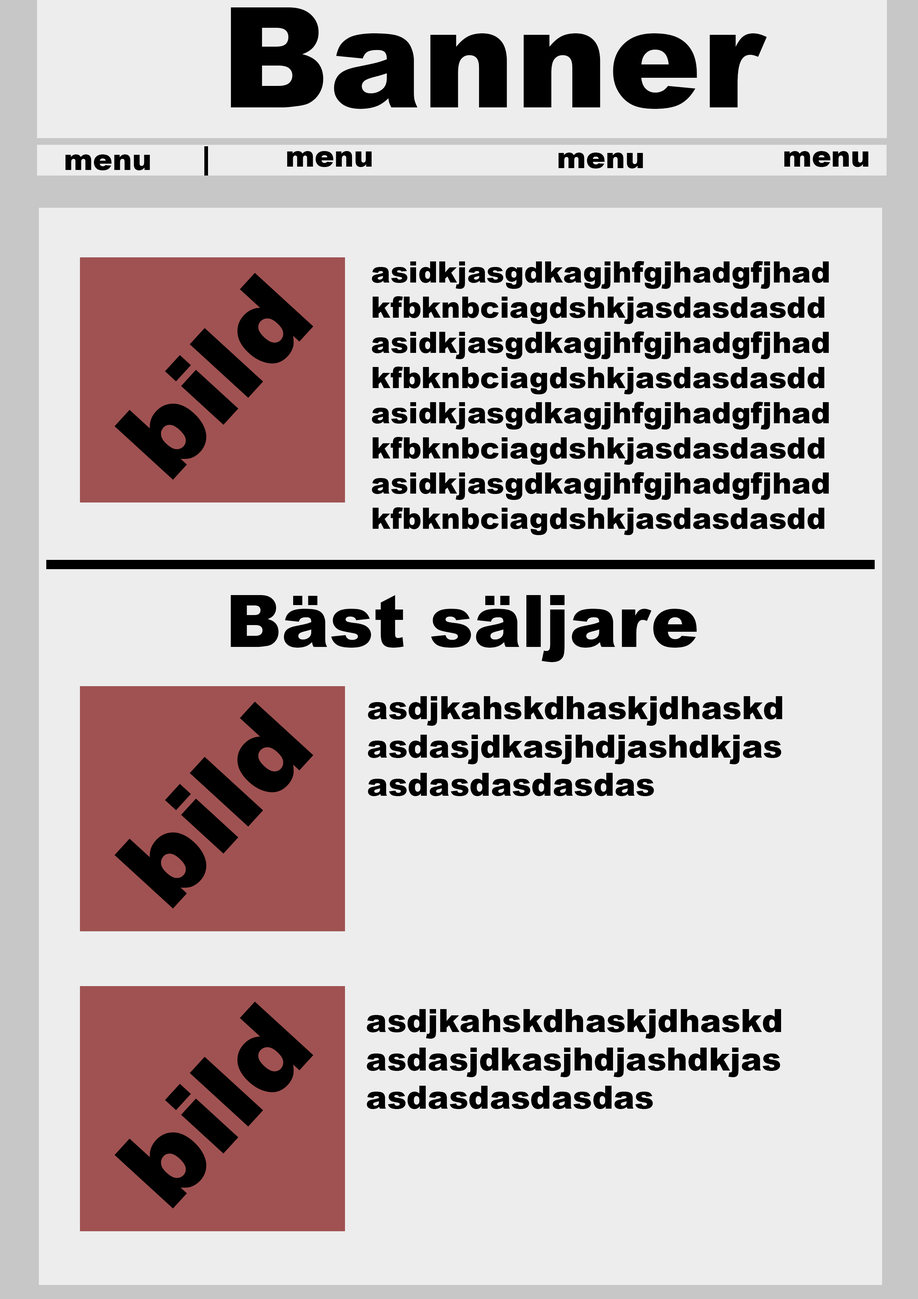
<style>
.page{position:relative;width:918px;height:1299px;background:#ededed}
.page>*{position:absolute;margin:0}
.t1{font:139.5px "Arial-Black";color:#000000}
.t2{font:29.3px "Arial-Black";color:#000000}
.t3{font:110.7px "Arial-Black";color:#000000}
.t4{font:72.1px "Arial-Black";color:#000000}
.t5{font:31.8px "Arial-Black";color:#000000}
</style>
<div class="page">
<p class="t1" style="left:231px;top:7px;width:536px;height:102px">Banner</p>
<p class="t2" style="left:65px;top:154px;width:85px;height:16px">menu</p>
<p class="t2" style="left:558px;top:153px;width:85px;height:15px">menu</p>
<p class="t2" style="left:784px;top:151px;width:85px;height:16px">menu</p>
<p class="t3" style="left:114px;top:272px;width:200px;height:208px;rotate:-48deg">bild</p>
<p class="t4" style="left:231px;top:595px;width:466px;height:67px">Bäst säljare</p>
<p class="t3" style="left:114px;top:701px;width:200px;height:208px;rotate:-48deg">bild</p>
<p class="t5" style="left:368px;top:696px;width:415px;height:100px">asdjkahskdhaskjdhaskd<br>asdasjdkasjhdjashdkjas<br>asdasdasdasdas</p>
<p class="t3" style="left:114px;top:1001px;width:200px;height:207px;rotate:-48deg">bild</p>
<p class="t5" style="left:367px;top:1009px;width:415px;height:100px">asdjkahskdhaskjdhaskd<br>asdasjdkasjhdjashdkjas<br>asdasdasdasdas</p>
</div>
